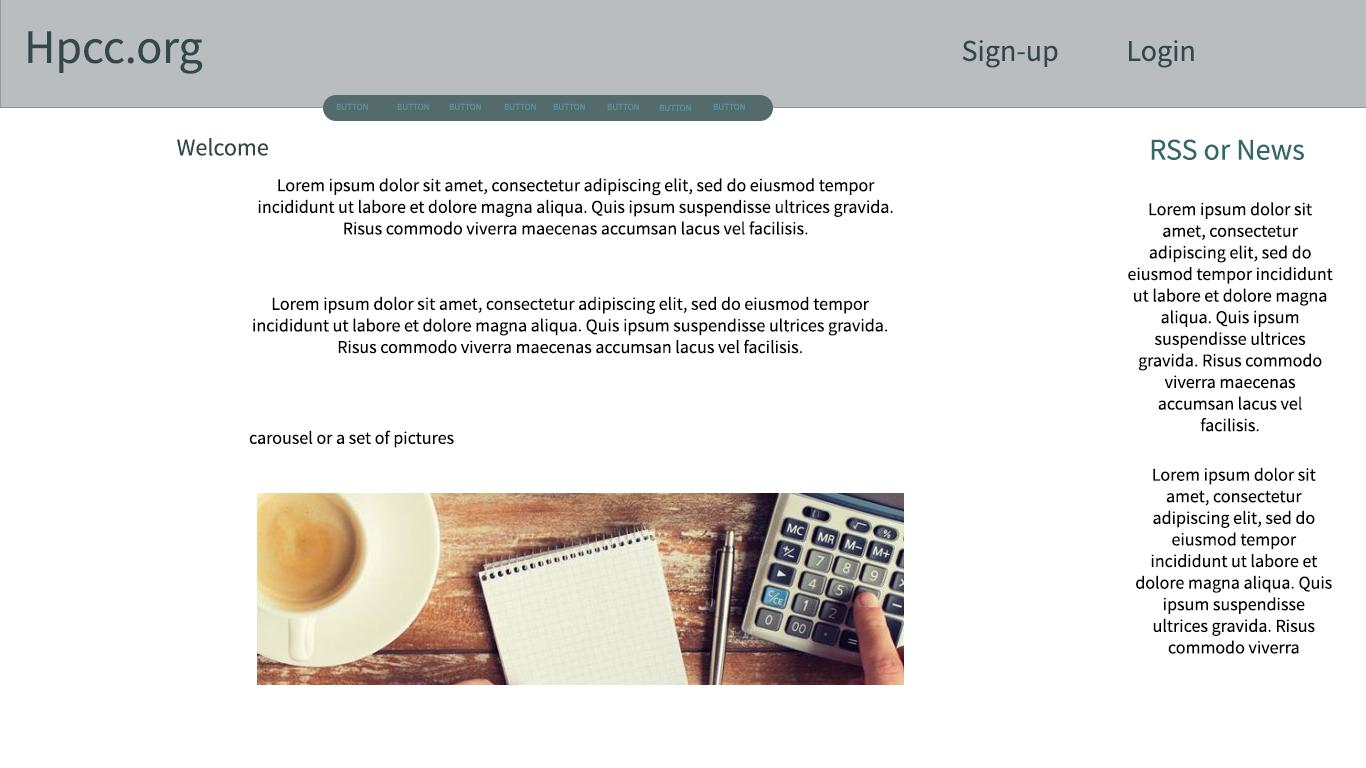
<style>
.page{position:relative;width:1366px;height:768px;background:#ffffff}
.page>*{position:absolute;margin:0}
.t1{font:48px "SourceSansRoman-Regular";color:#33484b}
.t2{font:30px "SourceSansRoman-Regular";color:#33484b}
.t3{font:9px "SourceSansRoman-Regular";color:#5396a0}
.t4{font:24px "SourceSansRoman-Regular";color:#33484b}
.t5{font:30px "SourceSansRoman-Regular";color:#33686b}
.t6{font:18px "SourceSansRoman-Regular";color:#000000}
</style>
<div class="page">
<p class="t1" style="left:28px;top:31px;width:175px;height:43px">Hpcc.org</p>
<p class="t2" style="left:962px;top:39px;width:96px;height:29px">Sign-up</p>
<p class="t2" style="left:1129px;top:39px;width:65px;height:29px">Login</p>
<p class="t3" style="left:336px;top:103px;width:32px;height:7px">BUTTON</p>
<p class="t3" style="left:397px;top:103px;width:32px;height:7px">BUTTON</p>
<p class="t3" style="left:449px;top:103px;width:32px;height:7px">BUTTON</p>
<p class="t3" style="left:504px;top:103px;width:32px;height:7px">BUTTON</p>
<p class="t3" style="left:553px;top:103px;width:32px;height:7px">BUTTON</p>
<p class="t3" style="left:607px;top:103px;width:32px;height:7px">BUTTON</p>
<p class="t3" style="left:659px;top:104px;width:32px;height:7px">BUTTON</p>
<p class="t3" style="left:713px;top:103px;width:32px;height:7px">BUTTON</p>
<p class="t4" style="left:177px;top:138px;width:91px;height:18px">Welcome</p>
<p class="t5" style="left:1151px;top:139px;width:153px;height:21px">RSS or News</p>
<p class="t6" style="left:258px;top:178px;width:635px;height:57px;text-align:center">Lorem ipsum dolor sit amet, consectetur adipiscing elit, sed do eiusmod tempor incididunt ut labore et dolore magna aliqua. Quis ipsum suspendisse ultrices gravida. Risus commodo viverra maecenas accumsan lacus vel facilisis.</p>
<p class="t6" style="left:1128px;top:202px;width:205px;height:230px;text-align:center">Lorem ipsum dolor sit amet, consectetur adipiscing elit, sed do eiusmod tempor incididunt ut labore et dolore magna aliqua. Quis ipsum suspendisse ultrices gravida. Risus commodo viverra maecenas accumsan lacus vel facilisis.</p>
<p class="t6" style="left:253px;top:296px;width:635px;height:58px;text-align:center">Lorem ipsum dolor sit amet, consectetur adipiscing elit, sed do eiusmod tempor incididunt ut labore et dolore magna aliqua. Quis ipsum suspendisse ultrices gravida. Risus commodo viverra maecenas accumsan lacus vel facilisis.</p>
<p class="t6" style="left:249px;top:430px;width:205px;height:18px">carousel or a set of pictures</p>
<p class="t6" style="left:1136px;top:467px;width:196px;height:187px;text-align:center">Lorem ipsum dolor sit amet, consectetur adipiscing elit, sed do eiusmod tempor incididunt ut labore et dolore magna aliqua. Quis ipsum suspendisse ultrices gravida. Risus commodo viverra maecenas accumsan lacus vel facilisis.</p>
</div>
